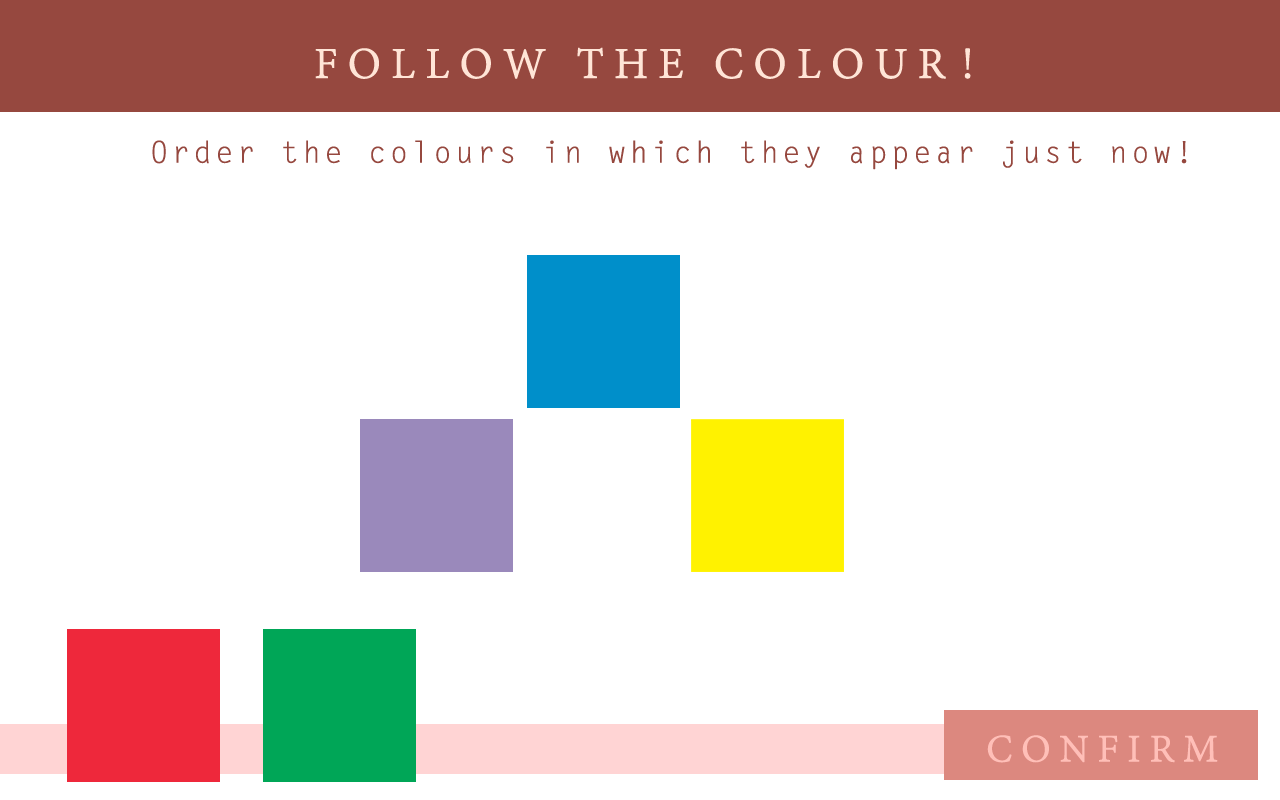
<style>
.page{position:relative;width:1280px;height:800px;background:#ffffff}
.page>*{position:absolute;margin:0}
.t1{font:48px "AdobeDevanagari-Regular";letter-spacing:0.2em;color:#ffe5d7;text-transform:uppercase;font-weight:bold}
.t2{font:30px "LetterGothicStd";letter-spacing:0.1em;color:#96483f;font-weight:bold}
.t3{font:42.3px "AdobeDevanagari-Regular";letter-spacing:0.2em;color:#ffbfb8;text-transform:uppercase;font-weight:bold}
</style>
<div class="page">
<p class="t1" style="left:315px;top:47px;width:656px;height:32px">Follow the Colour!</p>
<p class="t2" style="left:152px;top:140px;width:1035px;height:30px">Order the colours in which they appear just now!</p>
<p class="t3" style="left:987px;top:735px;width:231px;height:28px">Confirm</p>
</div>
